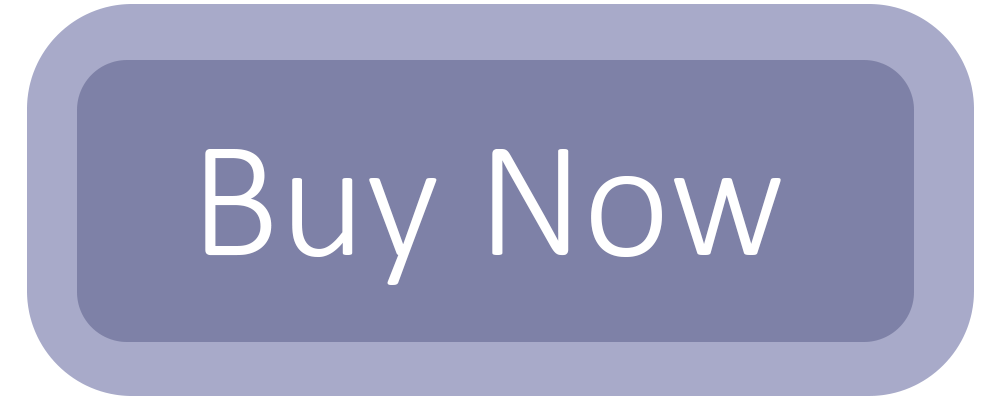
<style>
.page{position:relative;width:1000px;height:400px;background:#7e81a7}
.page>*{position:absolute;margin:0}
.t1{font:166.7px "Calibri-Light";color:#ffffff}
</style>
<div class="page">
<p class="t1" style="left:205px;top:149px;width:576px;height:136px">Buy Now</p>
</div>
